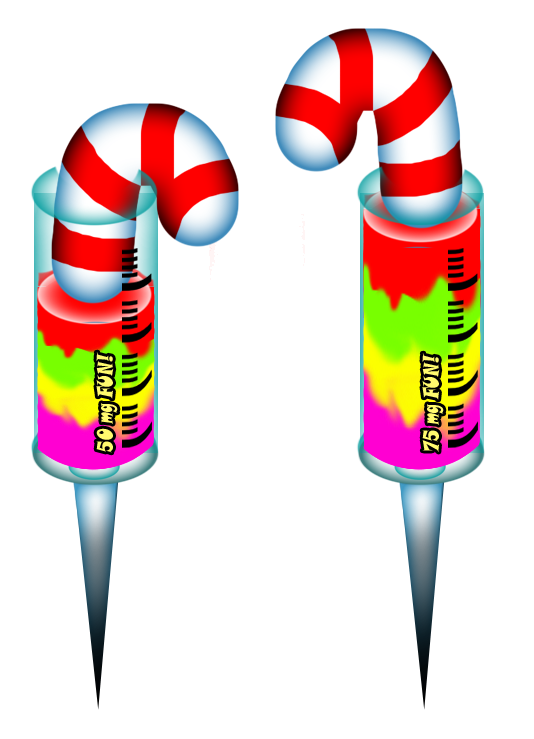
<style>
.page{position:relative;width:534px;height:739px;background:#ffffff}
.page>*{position:absolute;margin:0}
.t1{font:22px "SnapITC-Regular";color:#fffa6e;scale:0.62 1}
</style>
<div class="page">
<p class="t1" style="left:96px;top:352px;width:22px;height:101px;rotate:-90deg">50 mg FUN!</p>
<p class="t1" style="left:422px;top:353px;width:22px;height:99px;rotate:-90deg">75 mg FUN!</p>
</div>
